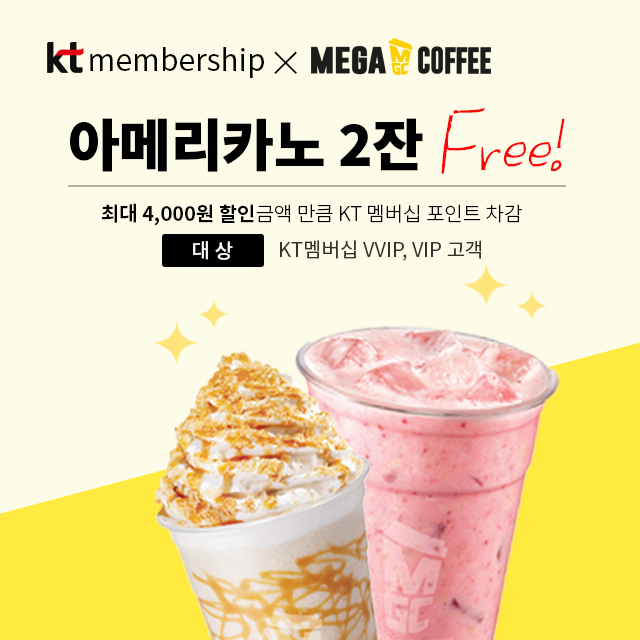
<style>
.page{position:relative;width:640px;height:640px;background:#fdfce8}
.page>*{position:absolute;margin:0}
.t1{font:30px "NotoSansKR-Regular";color:#000000}
.t2{font:35px "NotoSansKR-Light";color:#010101}
.t3{font:60px "UhBeeSoyun";color:#fa0707;font-style:italic}
.t4{font:56px "NotoSansKR-Black";color:#000000}
.t5{font:20px "NotoSansKR-Light";color:#000000}
.t6{font:20px "NotoSansKR-Bold";color:#000000}
.t7{font:20px "NotoSansKR-Medium";color:#fffefe}
.t8{font:20px "NotoSansKR-Regular";color:#34332e}
</style>
<div class="page">
<p class="t1" style="left:90px;top:47px;width:174px;height:31px">membership</p>
<p class="t2" style="left:274px;top:51px;width:23px;height:23px">×</p>
<p class="t3" style="left:441px;top:107px;width:124px;height:67px">Free!</p>
<p class="t4" style="left:70px;top:118px;width:353px;height:54px">아메리카노 2잔</p>
<p class="t5" style="left:101px;top:203px;width:421px;height:23px"><span class="t6">최대 4,000원 할인</span>금액 만큼 KT 멤버십 포인트 차감</p>
<p class="t7" style="left:193px;top:241px;width:40px;height:19px">대 상</p>
<p class="t8" style="left:280px;top:240px;width:201px;height:21px">KT멤버십 VVIP, VIP 고객</p>
</div>
